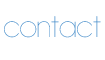
<style>
.page{position:relative;width:105px;height:60px;background:#ffffff}
.page>*{position:absolute;margin:0}
.t1{font:20.8px "BondoluoPeek";color:#438bc9}
</style>
<div class="page">
<p class="t1" style="left:4px;top:16px;width:97px;height:22px">Contact</p>
</div>
